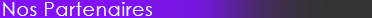
<style>
.page{position:relative;width:372px;height:18px;background:#8210ff}
.page>*{position:absolute;margin:0}
.t1{font:19.3px "CenturyGothic";letter-spacing:0.025em;color:#ffffff}
</style>
<div class="page">
<p class="t1" style="left:3px;top:2px;width:149px;height:14px">Nos Partenaires</p>
</div>
